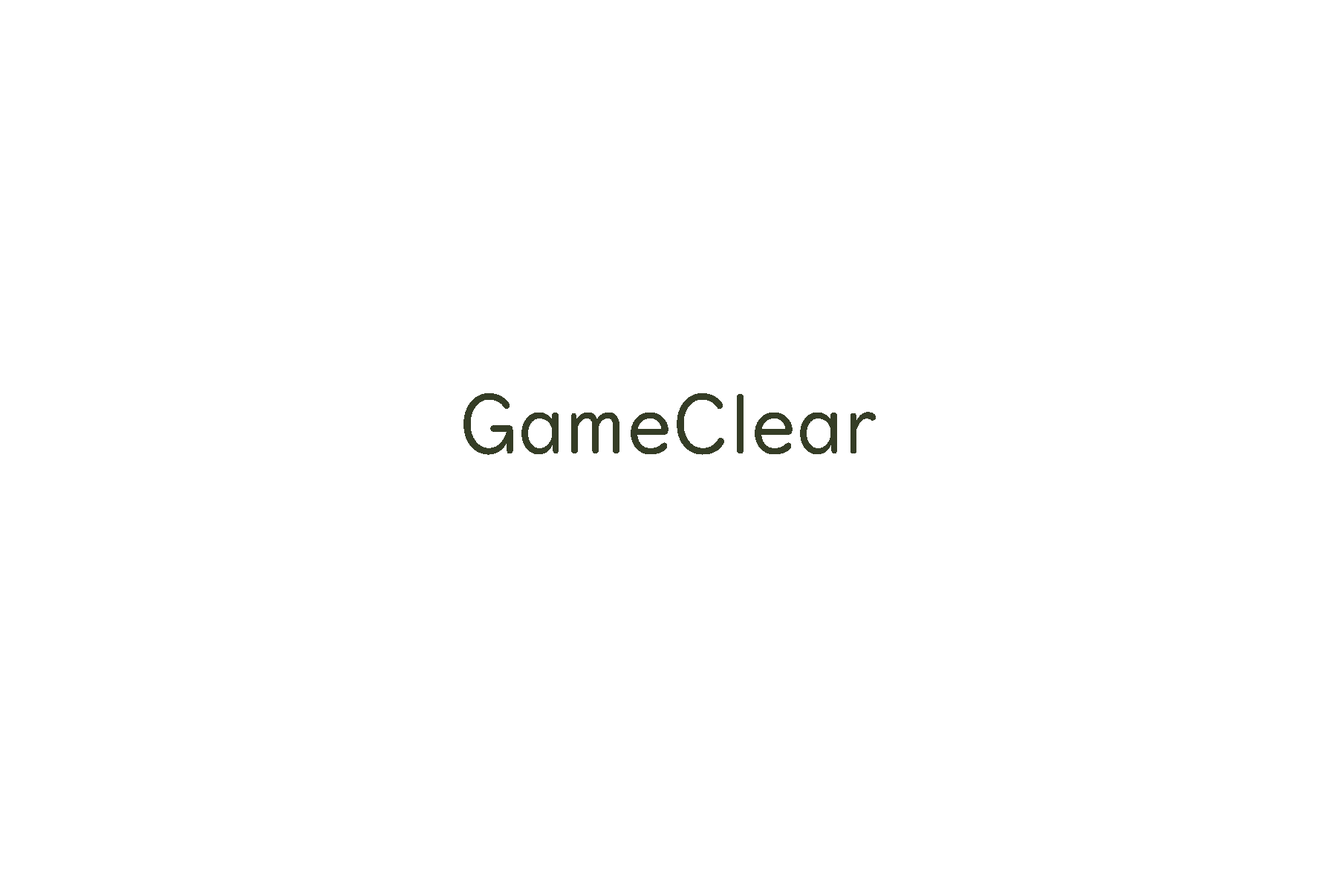
<style>
.page{position:relative;width:1337px;height:892px;background:#ffffff}
.page>*{position:absolute;margin:0}
.t1{font:83.7px "UDDigiKyokashoNK-R";color:#353d26;scale:0.93 1}
</style>
<div class="page">
<p class="t1" style="left:464px;top:393px;width:412px;height:62px">GameClear</p>
</div>
